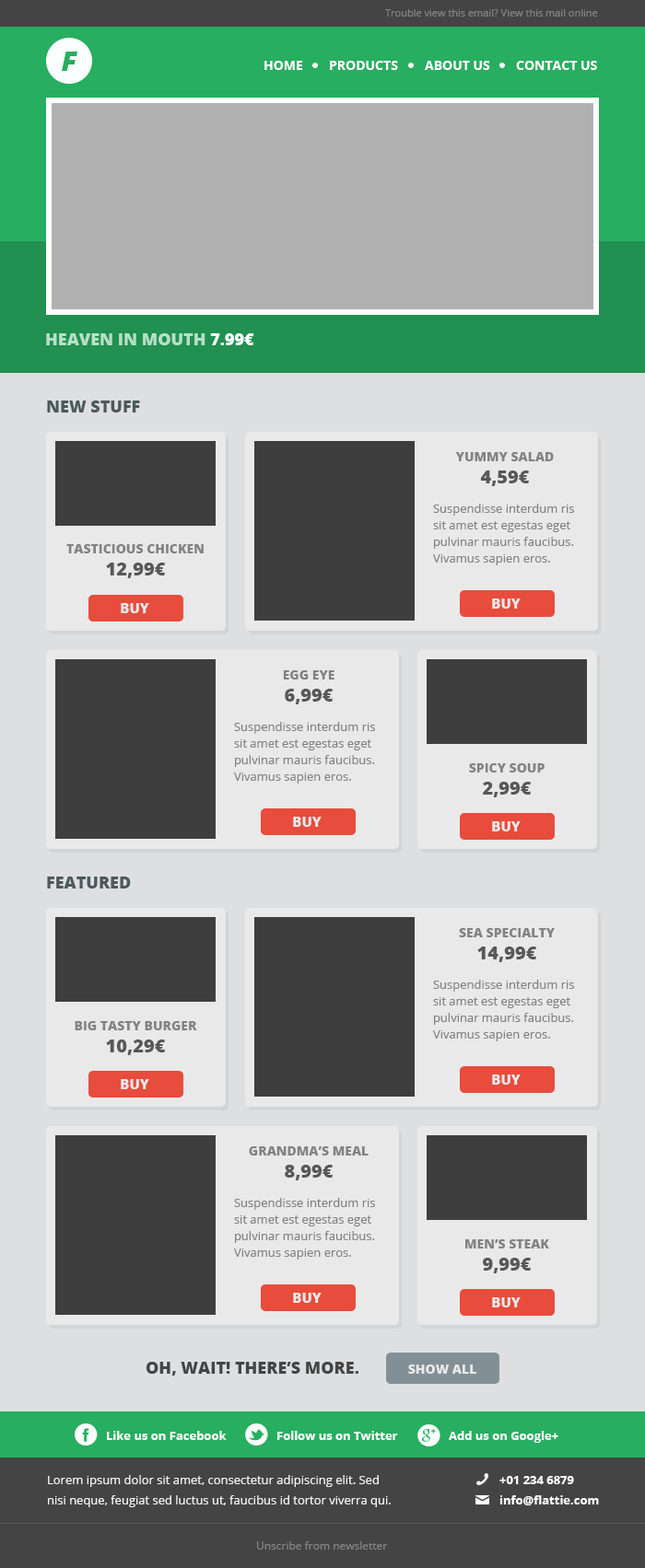
<style>
.page{position:relative;width:645px;height:1568px;background:#dedfe0}
.page>*{position:absolute;margin:0}
.t1{font:10.1px "OpenSans";color:#838383}
.t2{font:27.6px "OpenSans-ExtraboldItalic";color:#27ae60}
.t3{font:12.9px "OpenSans-Bold";color:#ffffff;text-transform:uppercase}
.t4{font:16.6px "OpenSans-Extrabold";color:#b5e1c8;text-transform:uppercase}
.t5{font:16.6px "OpenSans-Extrabold";color:#fafeff;text-transform:uppercase}
.t6{font:16.6px "OpenSans-Extrabold";color:#4c595c;text-transform:uppercase}
.t7{font:12.9px/22.1px "OpenSans-Extrabold";color:#828282;text-transform:uppercase}
.t8{font:18.4px/22.1px "OpenSans-Extrabold";color:#585858}
.t9{font:12px/16.6px "OpenSans";color:#828282}
.t10{font:13.8px "OpenSans-Extrabold";color:#e9e9e9;text-transform:uppercase}
.t11{font:16.6px "OpenSans-Extrabold";color:#454545;text-transform:uppercase}
.t12{font:12.9px "OpenSans-Extrabold";color:#e9e9e9;text-transform:uppercase}
.t13{font:12px "OpenSans-Bold";color:#ffffff}
.t14{font:12px/20.3px "OpenSans";color:#f0f0f0}
.t15{font:11px "OpenSans";color:#838383}
</style>
<div class="page">
<p class="t1" style="left:385px;top:9px;width:213px;height:8px">Trouble view this email? View this mail online</p>
<p class="t2" style="left:62px;top:52px;width:16px;height:19px">F</p>
<p class="t3" style="left:264px;top:61px;width:39px;height:9px">Home</p>
<p class="t3" style="left:330px;top:61px;width:68px;height:9px">Products</p>
<p class="t3" style="left:424px;top:61px;width:66px;height:9px">About us</p>
<p class="t3" style="left:516px;top:61px;width:81px;height:9px">Contact us</p>
<p class="t4" style="left:46px;top:333px;width:208px;height:12px">HEaven in mouth <span class="t5">7.99€</span></p>
<p class="t6" style="left:47px;top:401px;width:93px;height:11px">New stuff</p>
<p class="t7" style="left:455px;top:452px;width:98px;height:34px;text-align:center">Yummy salad<br><span class="t8">4,59€</span></p>
<p class="t9" style="left:433px;top:504px;width:141px;height:61px">Suspendisse interdum ris sit amet est egestas eget pulvinar mauris faucibus. Vivamus sapien eros.</p>
<p class="t7" style="left:66px;top:544px;width:137px;height:34px;text-align:center">Tasticious chicken<br><span class="t8">12,99€</span></p>
<p class="t10" style="left:121px;top:603px;width:28px;height:10px">Buy</p>
<p class="t10" style="left:492px;top:598px;width:28px;height:11px">Buy</p>
<p class="t7" style="left:283px;top:670px;width:51px;height:34px;text-align:center">egg eye<br><span class="t8">6,99€</span></p>
<p class="t9" style="left:234px;top:722px;width:141px;height:62px">Suspendisse interdum ris sit amet est egestas eget pulvinar mauris faucibus. Vivamus sapien eros.</p>
<p class="t7" style="left:469px;top:763px;width:75px;height:34px;text-align:center">spicy soup<br><span class="t8">2,99€</span></p>
<p class="t10" style="left:293px;top:817px;width:28px;height:10px">Buy</p>
<p class="t10" style="left:492px;top:821px;width:28px;height:10px">Buy</p>
<p class="t6" style="left:47px;top:877px;width:84px;height:12px">Featured</p>
<p class="t7" style="left:459px;top:928px;width:95px;height:34px;text-align:center">sea specialty<br><span class="t8">14,99€</span></p>
<p class="t9" style="left:433px;top:980px;width:141px;height:61px">Suspendisse interdum ris sit amet est egestas eget pulvinar mauris faucibus. Vivamus sapien eros.</p>
<p class="t7" style="left:75px;top:1021px;width:122px;height:34px;text-align:center">big tasty burger<br><span class="t8">10,29€</span></p>
<p class="t10" style="left:121px;top:1079px;width:28px;height:10px">Buy</p>
<p class="t10" style="left:492px;top:1074px;width:28px;height:11px">Buy</p>
<p class="t7" style="left:249px;top:1146px;width:119px;height:34px;text-align:center">grandma’s meal<br><span class="t8">8,99€</span></p>
<p class="t9" style="left:234px;top:1198px;width:141px;height:62px">Suspendisse interdum ris sit amet est egestas eget pulvinar mauris faucibus. Vivamus sapien eros.</p>
<p class="t7" style="left:465px;top:1239px;width:84px;height:34px;text-align:center">men’s steak<br><span class="t8">9,99€</span></p>
<p class="t10" style="left:293px;top:1293px;width:28px;height:10px">Buy</p>
<p class="t10" style="left:492px;top:1297px;width:28px;height:10px">Buy</p>
<p class="t11" style="left:145px;top:1362px;width:214px;height:14px">Oh, wait! There’s more.</p>
<p class="t12" style="left:408px;top:1365px;width:68px;height:9px">Show all</p>
<p class="t13" style="left:107px;top:1431px;width:119px;height:9px">Like us on Facebook</p>
<p class="t13" style="left:277px;top:1431px;width:121px;height:9px">Follow us on Twitter</p>
<p class="t13" style="left:448px;top:1431px;width:110px;height:12px">Add us on Google+</p>
<p class="t14" style="left:48px;top:1475px;width:342px;height:32px">Lorem ipsum dolor sit amet, consectetur adipiscing elit. Sed nisi neque, feugiat sed luctus ut, faucibus id tortor viverra qui.</p>
<p class="t13" style="left:499px;top:1476px;width:75px;height:8px">+01 234 6879</p>
<p class="t13" style="left:499px;top:1495px;width:99px;height:10px">info@flattie.com</p>
<p class="t15" style="left:257px;top:1541px;width:131px;height:9px">Unscribe from newsletter</p>
</div>
